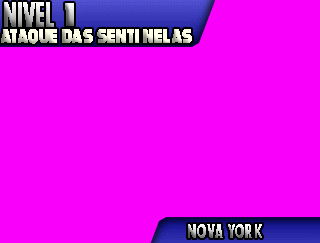
<style>
.page{position:relative;width:320px;height:243px;background:#f800f9}
.page>*{position:absolute;margin:0}
.t1{font:35px "Marvel-Regular"}
.t2{font:33px "Megabomb"}
.t3{font:20px "Megabomb";scale:0.8 1}
.t4{font:20px "Marvel-Regular"}
</style>
<div class="page">
<p class="t1" style="left:4px;top:2px;width:50px;height:25px">NIVEL</p>
<p class="t2" style="left:65px;top:3px;width:9px;height:23px">1</p>
<p class="t3" style="left:1px;top:29px;width:191px;height:15px">AtaQue Das Senti nelas</p>
<p class="t4" style="left:188px;top:224px;width:74px;height:14px">NOVA YOR K</p>
</div>
